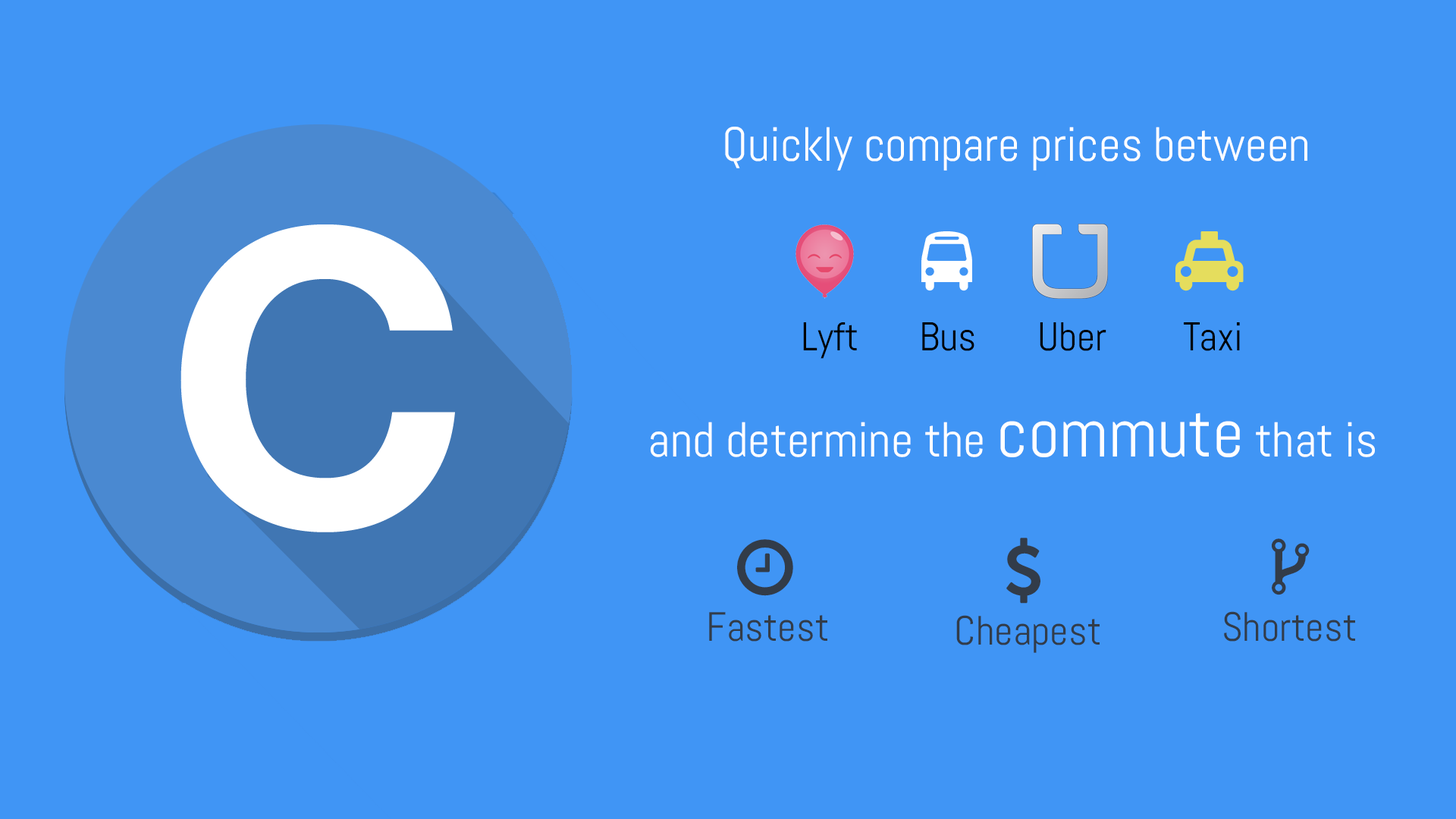
<style>
.page{position:relative;width:1456px;height:819px;background:#4095f5}
.page>*{position:absolute;margin:0}
.t1{font:47.9px "Abel-Regular";color:#ffffff}
.t2{font:40.2px "Abel-Regular";color:#000000}
.t3{font:48.9px "Abel-Regular";color:#ffffff}
.t4{font:69px "Abel-Regular";color:#ffffff}
.t5{font:40.8px "Abel-Regular";color:#323c49}
</style>
<div class="page">
<p class="t1" style="left:725px;top:127px;width:582px;height:44px">Quickly compare prices between</p>
<p class="t2" style="left:803px;top:322px;width:437px;height:37px">Lyft   Bus    Uber     Taxi</p>
<p class="t3" style="left:650px;top:413px;width:725px;height:44px">and determine the <span class="t4">commute</span> that is</p>
<p class="t5" style="left:709px;top:612px;width:118px;height:30px">Fastest</p>
<p class="t5" style="left:956px;top:615px;width:144px;height:38px">Cheapest</p>
<p class="t5" style="left:1224px;top:611px;width:131px;height:31px">Shortest</p>
</div>
